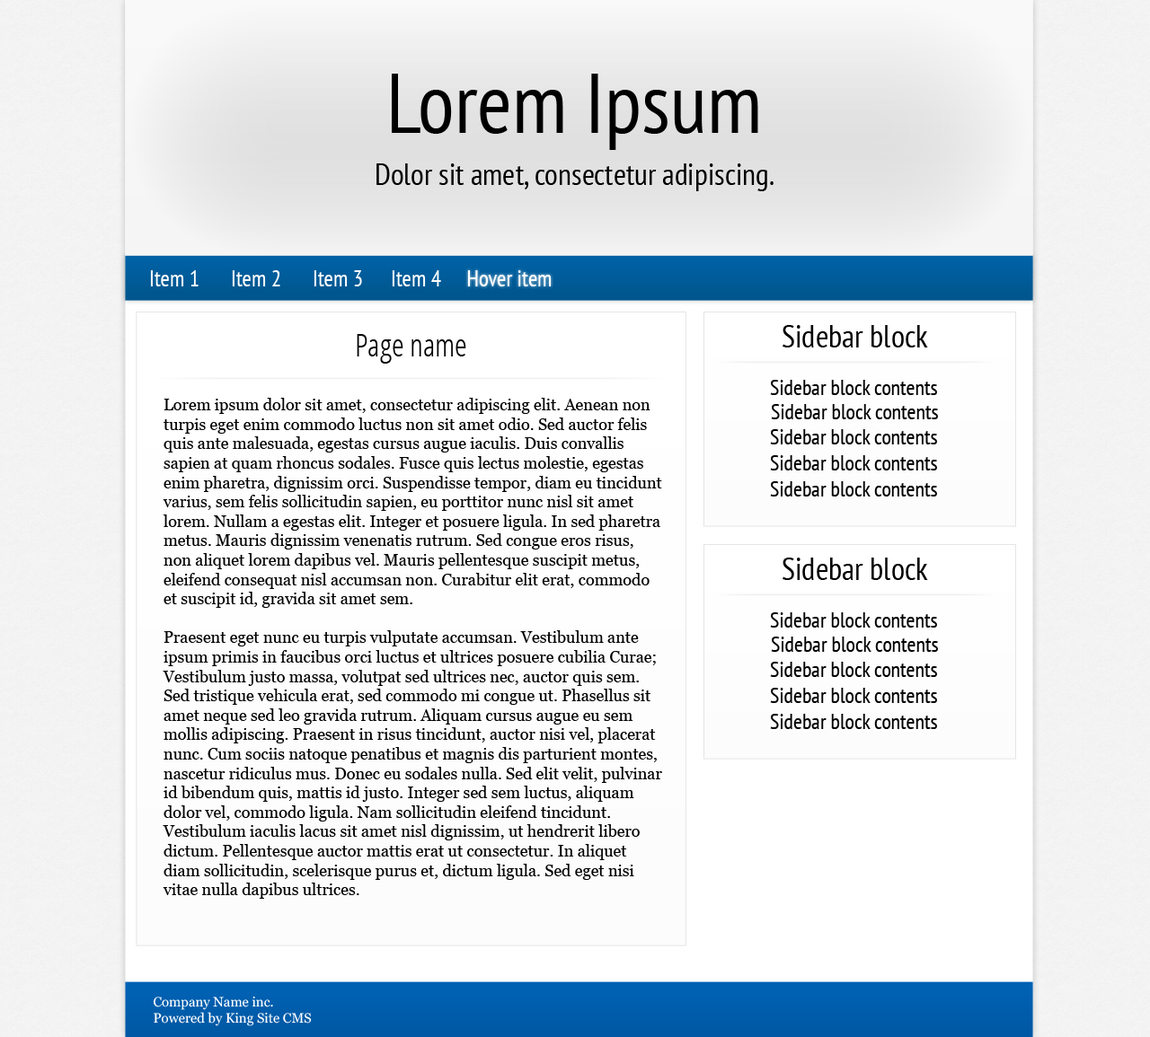
<style>
.page{position:relative;width:1150px;height:1037px;background:#ffffff}
.page>*{position:absolute;margin:0}
.t1{font:84.4px "PTSans-Narrow";color:#000000}
.t2{font:30.5px "PTSans-Narrow";color:#000000}
.t3{font:22.5px "PTSans-Narrow";color:#ffffff}
.t4{font:31.4px "PTSans-Narrow";color:#000000}
.t5{font:31.4px "OpenSans-CondensedLight";color:#000000}
.t6{font:21.6px "PTSans-Narrow";color:#000000}
.t7{font:16.2px "Georgia";color:#000000}
.t8{font:13.5px "Georgia";color:#ffffff}
</style>
<div class="page">
<p class="t1" style="left:392px;top:74px;width:366px;height:76px">Lorem Ipsum</p>
<p class="t2" style="left:376px;top:163px;width:397px;height:28px">Dolor sit amet, consectetur adipiscing.</p>
<p class="t3" style="left:150px;top:270px;width:48px;height:16px">Item 1</p>
<p class="t3" style="left:232px;top:270px;width:48px;height:16px">Item 2</p>
<p class="t3" style="left:313px;top:270px;width:49px;height:16px">Item 3</p>
<p class="t3" style="left:392px;top:270px;width:49px;height:16px">Item 4</p>
<p class="t3" style="left:467px;top:270px;width:84px;height:16px">Hover item</p>
<p class="t4" style="left:782px;top:325px;width:146px;height:23px">Sidebar block</p>
<p class="t5" style="left:357px;top:334px;width:109px;height:30px">Page name</p>
<p class="t6" style="left:770px;top:380px;width:167px;height:15px">Sidebar block contents</p>
<p class="t7" style="left:163px;top:398px;width:499px;height:501px">Lorem ipsum dolor sit amet, consectetur adipiscing elit. Aenean non turpis eget enim commodo luctus non sit amet odio. Sed auctor felis quis ante malesuada, egestas cursus augue iaculis. Duis convallis sapien at quam rhoncus sodales. Fusce quis lectus molestie, egestas enim pharetra, dignissim orci. Suspendisse tempor, diam eu tincidunt varius, sem felis sollicitudin sapien, eu porttitor nunc nisl sit amet lorem. Nullam a egestas elit. Integer et posuere ligula. In sed pharetra metus. Mauris dignissim venenatis rutrum. Sed congue eros risus, non aliquet lorem dapibus vel. Mauris pellentesque suscipit metus, eleifend consequat nisl accumsan non. Curabitur elit erat, commodo et suscipit id, gravida sit amet sem.<br><br>Praesent eget nunc eu turpis vulputate accumsan. Vestibulum ante ipsum primis in faucibus orci luctus et ultrices posuere cubilia Curae; Vestibulum justo massa, volutpat sed ultrices nec, auctor quis sem. Sed tristique vehicula erat, sed commodo mi congue ut. Phasellus sit amet neque sed leo gravida rutrum. Aliquam cursus augue eu sem mollis adipiscing. Praesent in risus tincidunt, auctor nisi vel, placerat nunc. Cum sociis natoque penatibus et magnis dis parturient montes, nascetur ridiculus mus. Donec eu sodales nulla. Sed elit velit, pulvinar id bibendum quis, mattis id justo. Integer sed sem luctus, aliquam dolor vel, commodo ligula. Nam sollicitudin eleifend tincidunt. Vestibulum iaculis lacus sit amet nisl dignissim, ut hendrerit libero dictum. Pellentesque auctor mattis erat ut consectetur. In aliquet diam sollicitudin, scelerisque purus et, dictum ligula. Sed eget nisi vitae nulla dapibus ultrices.<br><br>Donec posuere lectus ut cursus scelerisque. In ultrices condimentum mauris nec condimentum. Fusce aliquam ante at justo vestibulum aliquet. Pellentesque volutpat sem id est imperdiet hendrerit in a augue. Morbi sed ipsum ac nisi sagittis tempus eu sit amet risus. Integer enim nulla, suscipit sed consequat in, rutrum at mauris. Vivamus condimentum, eros eget ornare euismod, libero mauris laoreet turpis, eu tristique metus mi sed nisi.</p>
<p class="t6" style="left:771px;top:404px;width:167px;height:15px">Sidebar block contents</p>
<p class="t6" style="left:770px;top:429px;width:167px;height:16px">Sidebar block contents</p>
<p class="t6" style="left:770px;top:455px;width:167px;height:16px">Sidebar block contents</p>
<p class="t6" style="left:770px;top:481px;width:167px;height:16px">Sidebar block contents</p>
<p class="t4" style="left:782px;top:558px;width:146px;height:22px">Sidebar block</p>
<p class="t6" style="left:770px;top:612px;width:167px;height:16px">Sidebar block contents</p>
<p class="t6" style="left:771px;top:637px;width:167px;height:15px">Sidebar block contents</p>
<p class="t6" style="left:770px;top:662px;width:167px;height:15px">Sidebar block contents</p>
<p class="t6" style="left:770px;top:688px;width:167px;height:15px">Sidebar block contents</p>
<p class="t6" style="left:770px;top:714px;width:167px;height:15px">Sidebar block contents</p>
<p class="t8" style="left:153px;top:996px;width:159px;height:31px">Company Name inc. <br>Powered by King Site CMS</p>
</div>
